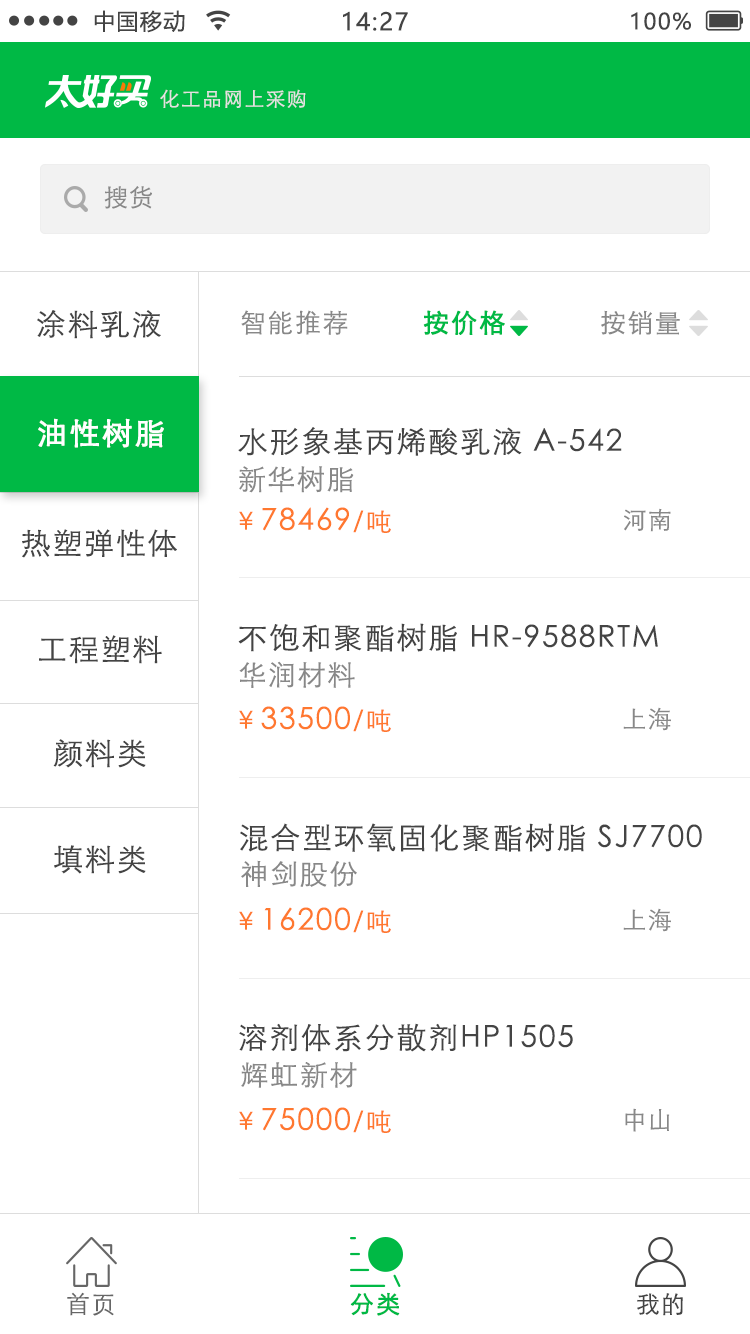
<style>
.page{position:relative;width:750px;height:1334px;background:#ffffff}
.page>*{position:absolute;margin:0}
.t1{font:22px "MicrosoftYaHei";letter-spacing:0.06em;color:#444444}
.t2{font:24px "MicrosoftYaHei";letter-spacing:0.06em;color:#444444}
.t3{font:20px "STXihei";letter-spacing:0.06em;color:#e2e2e2}
.t4{font:24px "STXihei";letter-spacing:0.06em;color:#888888}
.t5{font:30px "STXihei";letter-spacing:0.06em;color:#444444}
.t6{font:26px "STXihei";letter-spacing:0.06em;color:#888888}
.t7{font:26px "STXihei";letter-spacing:0.06em;color:#00b945;font-weight:bold}
.t8{font:30px "STXihei";letter-spacing:0.06em;color:#ffffff;font-weight:bold}
.t9{font:28px "STXihei";letter-spacing:0.06em;color:#888888}
.t10{font:30px "STXihei";letter-spacing:0.06em;color:#ff782f}
.t11{font:26px "STXihei";letter-spacing:0.06em;color:#ff782f}
.t12{font:24px "STXihei";letter-spacing:0.06em;color:#666666}
.t13{font:24px "STXihei";letter-spacing:0.06em;color:#00b945;font-weight:bold}
.t14{font:24px "STXihei";letter-spacing:0.06em;color:#444444}
</style>
<div class="page">
<p class="t1" style="left:94px;top:10px;width:91px;height:23px">中国移动</p>
<p class="t2" style="left:343px;top:11px;width:65px;height:20px">14:27</p>
<p class="t1" style="left:631px;top:12px;width:60px;height:18px">100%</p>
<p class="t3" style="left:160px;top:89px;width:146px;height:19px">化工品网上采购</p>
<p class="t4" style="left:104px;top:186px;width:48px;height:23px">搜货</p>
<p class="t5" style="left:37px;top:310px;width:124px;height:29px">涂料乳液</p>
<p class="t6" style="left:241px;top:310px;width:107px;height:25px">智能推荐</p>
<p class="t7" style="left:423px;top:310px;width:82px;height:25px">按价格</p>
<p class="t6" style="left:601px;top:310px;width:79px;height:25px">按销量</p>
<p class="t8" style="left:38px;top:418px;width:126px;height:30px">油性树脂</p>
<p class="t5" style="left:238px;top:427px;width:384px;height:29px">水形象基丙烯酸乳液 A-542</p>
<p class="t9" style="left:239px;top:466px;width:115px;height:27px">新华树脂</p>
<p class="t10" style="left:239px;top:507px;width:152px;height:26px"><span class="t11">￥</span>78469<span class="t11">/吨</span></p>
<p class="t4" style="left:624px;top:508px;width:47px;height:24px">河南</p>
<p class="t5" style="left:22px;top:529px;width:155px;height:29px">热塑弹性体</p>
<p class="t5" style="left:238px;top:623px;width:420px;height:29px">不饱和聚酯树脂 HR-9588RTM</p>
<p class="t5" style="left:39px;top:635px;width:123px;height:29px">工程塑料</p>
<p class="t9" style="left:239px;top:661px;width:116px;height:27px">华润材料</p>
<p class="t10" style="left:239px;top:706px;width:152px;height:26px"><span class="t11">￥</span>33500<span class="t11">/吨</span></p>
<p class="t4" style="left:623px;top:707px;width:48px;height:24px">上海</p>
<p class="t5" style="left:53px;top:739px;width:93px;height:29px">颜料类</p>
<p class="t5" style="left:240px;top:823px;width:462px;height:29px">混合型环氧固化聚酯树脂 SJ7700</p>
<p class="t5" style="left:54px;top:845px;width:92px;height:29px">填料类</p>
<p class="t9" style="left:241px;top:860px;width:116px;height:27px">神剑股份</p>
<p class="t10" style="left:239px;top:907px;width:152px;height:26px"><span class="t11">￥</span>16200<span class="t11">/吨</span></p>
<p class="t4" style="left:623px;top:908px;width:48px;height:24px">上海</p>
<p class="t5" style="left:239px;top:1023px;width:334px;height:29px">溶剂体系分散剂HP1505</p>
<p class="t9" style="left:241px;top:1062px;width:116px;height:26px">辉虹新材</p>
<p class="t10" style="left:239px;top:1107px;width:152px;height:26px"><span class="t11">￥</span>75000<span class="t11">/吨</span></p>
<p class="t4" style="left:625px;top:1108px;width:45px;height:24px">中山</p>
<p class="t12" style="left:67px;top:1292px;width:47px;height:24px">首页</p>
<p class="t13" style="left:350px;top:1292px;width:50px;height:24px">分类</p>
<p class="t14" style="left:637px;top:1293px;width:46px;height:23px">我的</p>
</div>
